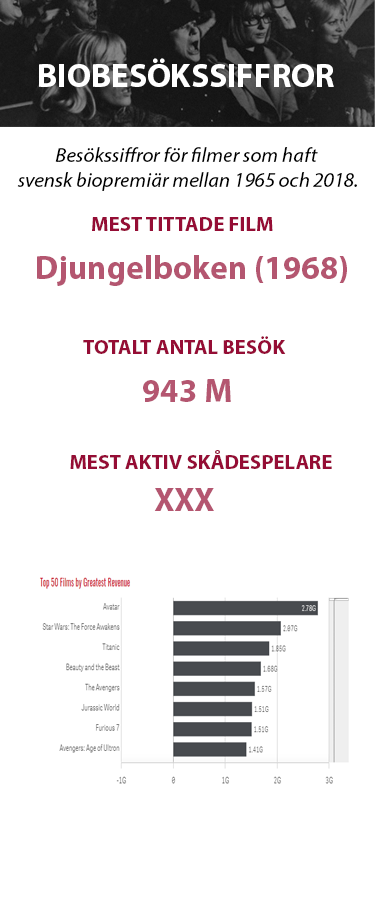
<style>
.page{position:relative;width:375px;height:900px;background:#ffffff}
.page>*{position:absolute;margin:0}
.t1{font:33.3px "MyriadPro-Bold";color:#ffffff}
.t2{font:20.8px "MyriadPro-It";color:#000000}
.t3{font:20.8px "MyriadPro-Bold";color:#950d35}
.t4{font:20.8px "MyriadPro-It";color:#ffffff}
.t5{font:33.3px "MyriadPro-Bold";color:#b45670}
</style>
<div class="page">
<p class="t1" style="left:39px;top:58px;width:295px;height:29px">BIOBESÖKSSIFFROR</p>
<p class="t2" style="left:17px;top:147px;width:340px;height:44px;text-align:center">Besökssiffror för filmer som haft <br>svensk biopremiär mellan 1965 och 2018.</p>
<p class="t3" style="left:92px;top:217px;width:232px;height:18px">MEST TITTADE FILM<span class="t4">Ipsum</span></p>
<p class="t5" style="left:37px;top:255px;width:310px;height:31px">Djungelboken (1968)</p>
<p class="t3" style="left:83px;top:336px;width:203px;height:18px">TOTALT ANTAL BESÖK</p>
<p class="t5" style="left:143px;top:379px;width:88px;height:23px">943 M</p>
<p class="t3" style="left:70px;top:450px;width:262px;height:19px">MEST AKTIV SKÅDESPELARE</p>
<p class="t5" style="left:154px;top:488px;width:60px;height:23px">XXX</p>
</div>
